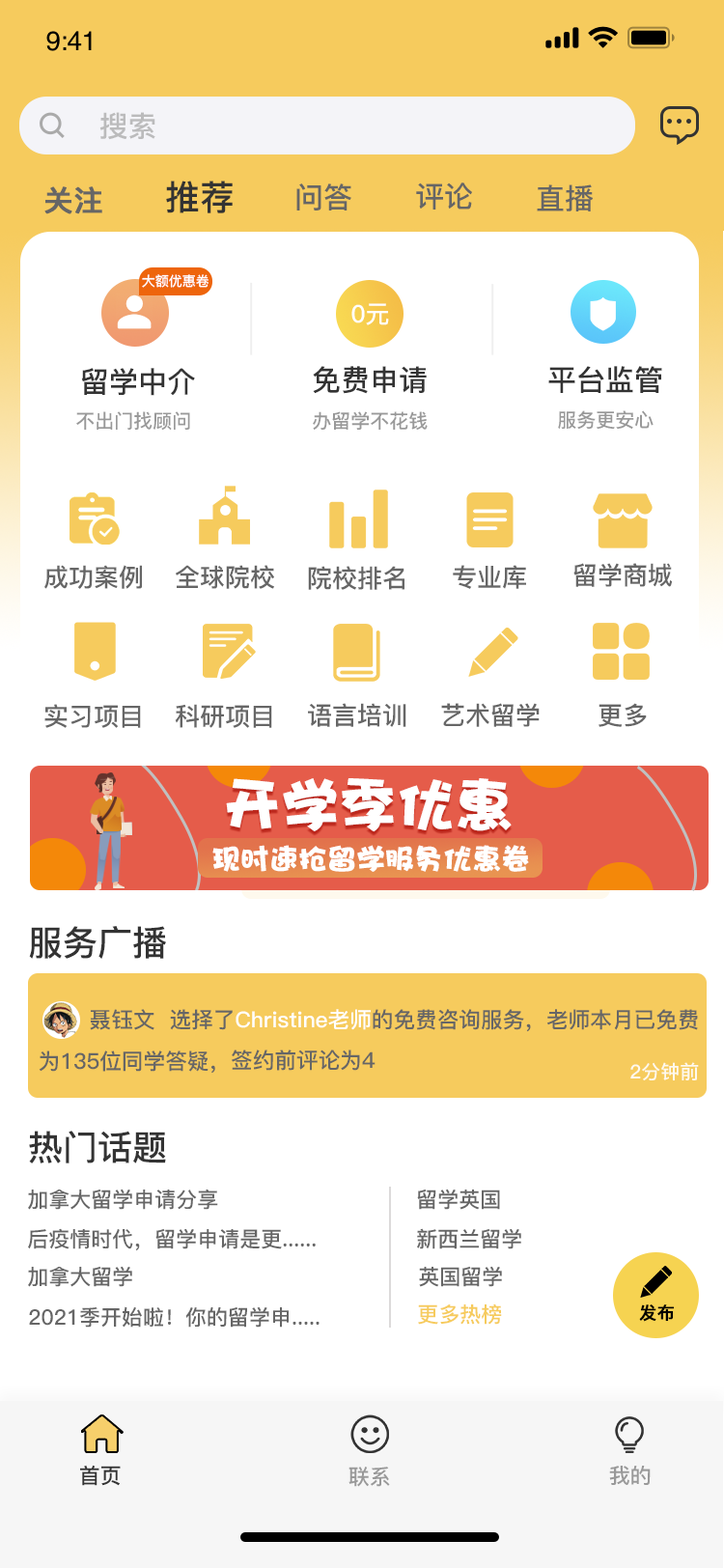
<style>
.page{position:relative;width:724px;height:1568px;background:#ffffff}
.page>*{position:absolute;margin:0}
.t1{font:29px "PingFang-SC-Bold";color:#bbbbbc}
.t2{font:34.8px "PingFang-SC-Bold";color:#333333}
.t3{font:29px "PingFang-SC-Bold";color:#666666}
.t4{font:29px "PingFang-SC-Bold";color:#666666;font-weight:bold}
.t5{font:13.5px "PingFang-SC-Bold";color:#ffffff}
.t6{font:24.3px "PingFang-SC-Bold";color:#ffffff}
.t7{font:29px "PingFang-SC-Bold";color:#333333}
.t8{font:19.3px "PingFang-SC-Bold";color:#999999}
.t9{font:25.1px "PingFang-SC-Bold";color:#666666}
.t10{font:57.9px "DFPHaiBaoW12";color:#ffffff}
.t11{font:29px "DFPHaiBaoW12";color:#ffffff}
.t12{font:21.9px/40.7px "PingFang-SC-Bold";color:#666666}
.t13{font:21.9px/40.7px "PingFang-SC-Bold";color:#333333}
.t14{font:21.9px/40.7px "PingFang-SC-Bold";color:#ffffff}
.t15{font:19.3px "PingFang-SC-Bold";color:#fef9ed}
.t16{font:21.2px "PingFang-SC-Bold";color:#666666}
.t17{font:21.2px "PingFang-SC-Bold";color:#f6cb5d}
.t18{font:17.4px "PingFang-SC-Bold";color:#000000;font-weight:bold}
.t19{font:21.2px "PingFang-SC-Bold";color:#333333}
.t20{font:21.2px "PingFang-SC-Bold";color:#999999}
</style>
<div class="page">
<p class="t1" style="left:99px;top:112px;width:56px;height:28px">搜索</p>
<p class="t2" style="left:166px;top:181px;width:67px;height:32px">推荐</p>
<p class="t3" style="left:296px;top:183px;width:55px;height:27px">问答</p>
<p class="t3" style="left:416px;top:182px;width:56px;height:28px">评论</p>
<p class="t3" style="left:537px;top:184px;width:57px;height:27px">直播</p>
<p class="t4" style="left:44px;top:186px;width:58px;height:28px">关注</p>
<p class="t5" style="left:142px;top:274px;width:67px;height:14px">大额优惠卷</p>
<p class="t6" style="left:351px;top:303px;width:38px;height:22px">0元</p>
<p class="t7" style="left:313px;top:366px;width:114px;height:28px">免费申请</p>
<p class="t7" style="left:548px;top:366px;width:114px;height:27px">平台监管</p>
<p class="t7" style="left:81px;top:368px;width:114px;height:28px">留学中介</p>
<p class="t8" style="left:76px;top:411px;width:114px;height:20px">不出门找顾问</p>
<p class="t8" style="left:313px;top:411px;width:115px;height:19px">办留学不花钱</p>
<p class="t8" style="left:558px;top:410px;width:96px;height:19px">服务更安心</p>
<p class="t9" style="left:44px;top:565px;width:98px;height:24px">成功案例</p>
<p class="t9" style="left:176px;top:565px;width:98px;height:24px">全球院校</p>
<p class="t9" style="left:308px;top:566px;width:97px;height:24px">院校排名</p>
<p class="t9" style="left:453px;top:565px;width:73px;height:24px">专业库</p>
<p class="t9" style="left:574px;top:563px;width:98px;height:24px">留学商城</p>
<p class="t9" style="left:44px;top:704px;width:97px;height:24px">实习项目</p>
<p class="t9" style="left:175px;top:704px;width:97px;height:24px">科研项目</p>
<p class="t9" style="left:308px;top:703px;width:98px;height:24px">语言培训</p>
<p class="t9" style="left:441px;top:703px;width:99px;height:24px">艺术留学</p>
<p class="t9" style="left:599px;top:703px;width:48px;height:24px">更多</p>
<p class="t10" style="left:226px;top:778px;width:286px;height:54px">开学季优惠</p>
<p class="t11" style="left:212px;top:845px;width:317px;height:27px">现时速抢留学服务优惠卷</p>
<p class="t2" style="left:29px;top:926px;width:137px;height:33px">服务广播</p>
<p class="t12" style="left:39px;top:1009px;width:659px;height:65px"><span class="t13">       </span>聂钰文  选择了<span class="t14">Christine老师</span>的免费咨询服务，老师本月已免费 <br>为135位同学答疑，签约前评论为4</p>
<p class="t15" style="left:630px;top:1062px;width:69px;height:18px">2分钟前</p>
<p class="t2" style="left:29px;top:1131px;width:137px;height:32px">热门话题</p>
<p class="t16" style="left:28px;top:1189px;width:190px;height:21px">加拿大留学申请分享</p>
<p class="t16" style="left:417px;top:1189px;width:83px;height:21px">留学英国</p>
<p class="t16" style="left:28px;top:1228px;width:288px;height:23px">后疫情时代，留学申请是更......</p>
<p class="t16" style="left:417px;top:1228px;width:104px;height:21px">新西兰留学</p>
<p class="t16" style="left:28px;top:1266px;width:104px;height:21px">加拿大留学</p>
<p class="t16" style="left:419px;top:1266px;width:83px;height:21px">英国留学</p>
<p class="t16" style="left:29px;top:1306px;width:291px;height:22px">2021季开始啦！你的留学申.....</p>
<p class="t17" style="left:418px;top:1303px;width:84px;height:22px">更多热榜</p>
<p class="t18" style="left:639px;top:1304px;width:36px;height:18px">发布</p>
<p class="t19" style="left:80px;top:1465px;width:41px;height:21px">首页</p>
<p class="t20" style="left:349px;top:1467px;width:41px;height:20px">联系</p>
<p class="t20" style="left:609px;top:1466px;width:42px;height:19px">我的</p>
</div>
